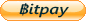
<style>
.page{position:relative;width:86px;height:21px}
.page>*{position:absolute;margin:0}
.t1{font:14px "SegoeUI-SemiboldItalic";color:#002b36;scale:1.25 1}
</style>
<div class="page">
<p class="t1" style="left:19px;top:3px;width:50px;height:15px">฿itpay</p>
</div>
